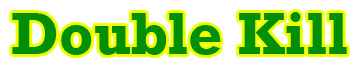
<style>
.page{position:relative;width:356px;height:71px;background:#ffffff}
.page>*{position:absolute;margin:0}
.t1{font:60px "Rockwell-Bold";color:#008f07}
</style>
<div class="page">
<p class="t1" style="left:12px;top:12px;width:335px;height:43px">Double Kill</p>
</div>
